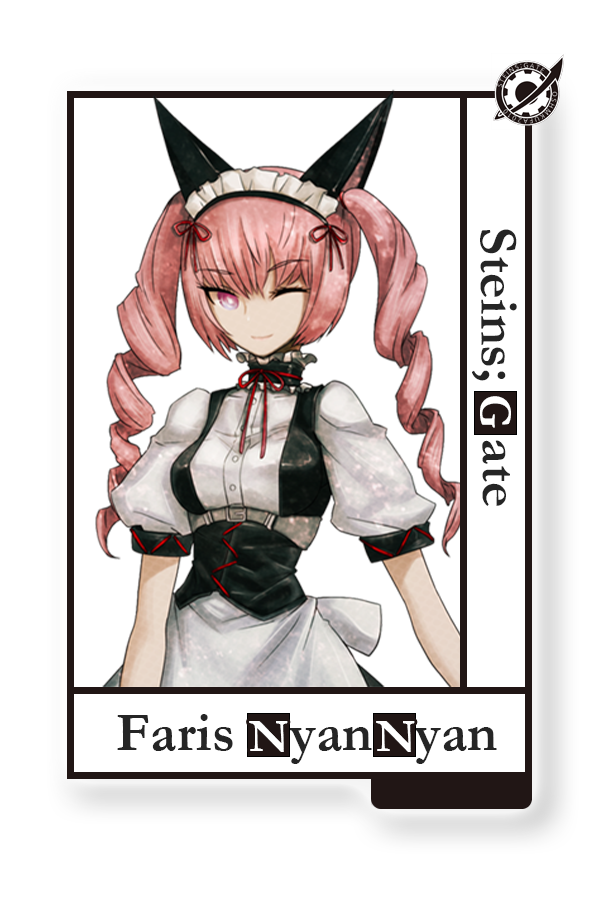
<style>
.page{position:relative;width:600px;height:900px;background:#ffffff}
.page>*{position:absolute;margin:0}
.t1{font:55.4px "Garamond-Bold";color:#252525}
.t2{font:47px "Garamond-Bold";color:#ffffff}
</style>
<div class="page">
<p class="t1" style="left:472px;top:229px;width:45px;height:277px;rotate:89deg">Steins;    ate</p>
<p class="t2" style="left:480px;top:396px;width:31px;height:32px;rotate:90deg">G</p>
<p class="t1" style="left:117px;top:714px;width:380px;height:50px">Faris    yan   yan</p>
<p class="t2" style="left:249px;top:721px;width:39px;height:31px">N</p>
<p class="t2" style="left:376px;top:721px;width:39px;height:31px">N</p>
</div>
